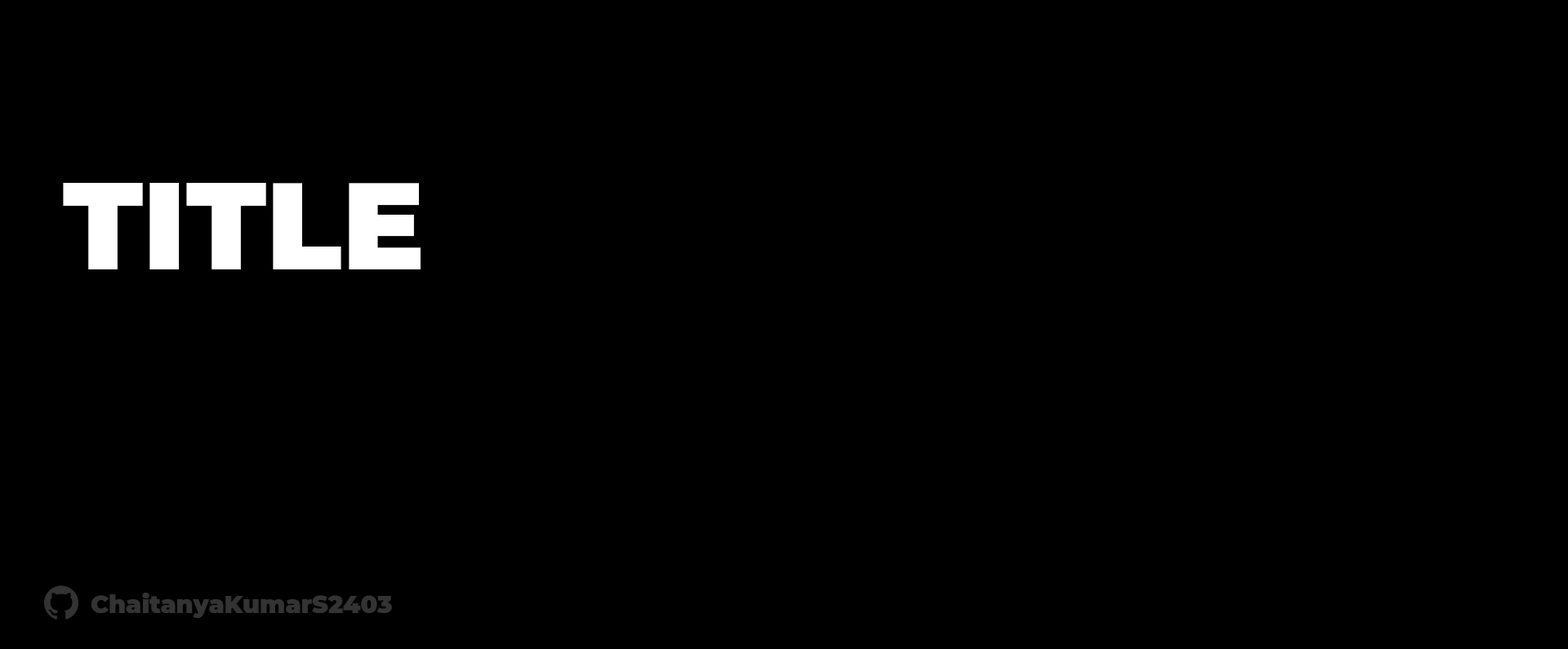
<style>
.page{position:relative;width:1568px;height:649px;background:#000000}
.page>*{position:absolute;margin:0}
.t1{font:122.5px "Montserrat-Black";color:#ffffff}
.t2{font:24.5px "Montserrat-Black";color:#333333}
</style>
<div class="page">
<p class="t1" style="left:63px;top:183px;width:358px;height:87px">TITLE</p>
<p class="t2" style="left:91px;top:593px;width:301px;height:25px">ChaitanyaKumarS2403</p>
</div>
